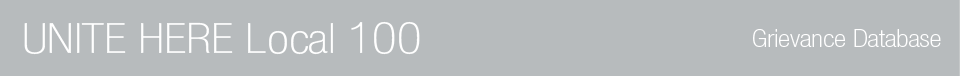
<style>
.page{position:relative;width:960px;height:76px;background:#b7bbbd}
.page>*{position:absolute;margin:0}
.t1{font:42.4px "HelveticaNeueLTStd-ThCn";color:#ffffff;scale:1.2 1}
.t2{font:24px "HelveticaNeueLTStd-ThCn";color:#ffffff;scale:1.2 1}
</style>
<div class="page">
<p class="t1" style="left:24px;top:21px;width:396px;height:34px">UNITE HERE Local 100</p>
<p class="t2" style="left:753px;top:29px;width:188px;height:18px">Grievance Database</p>
</div>
